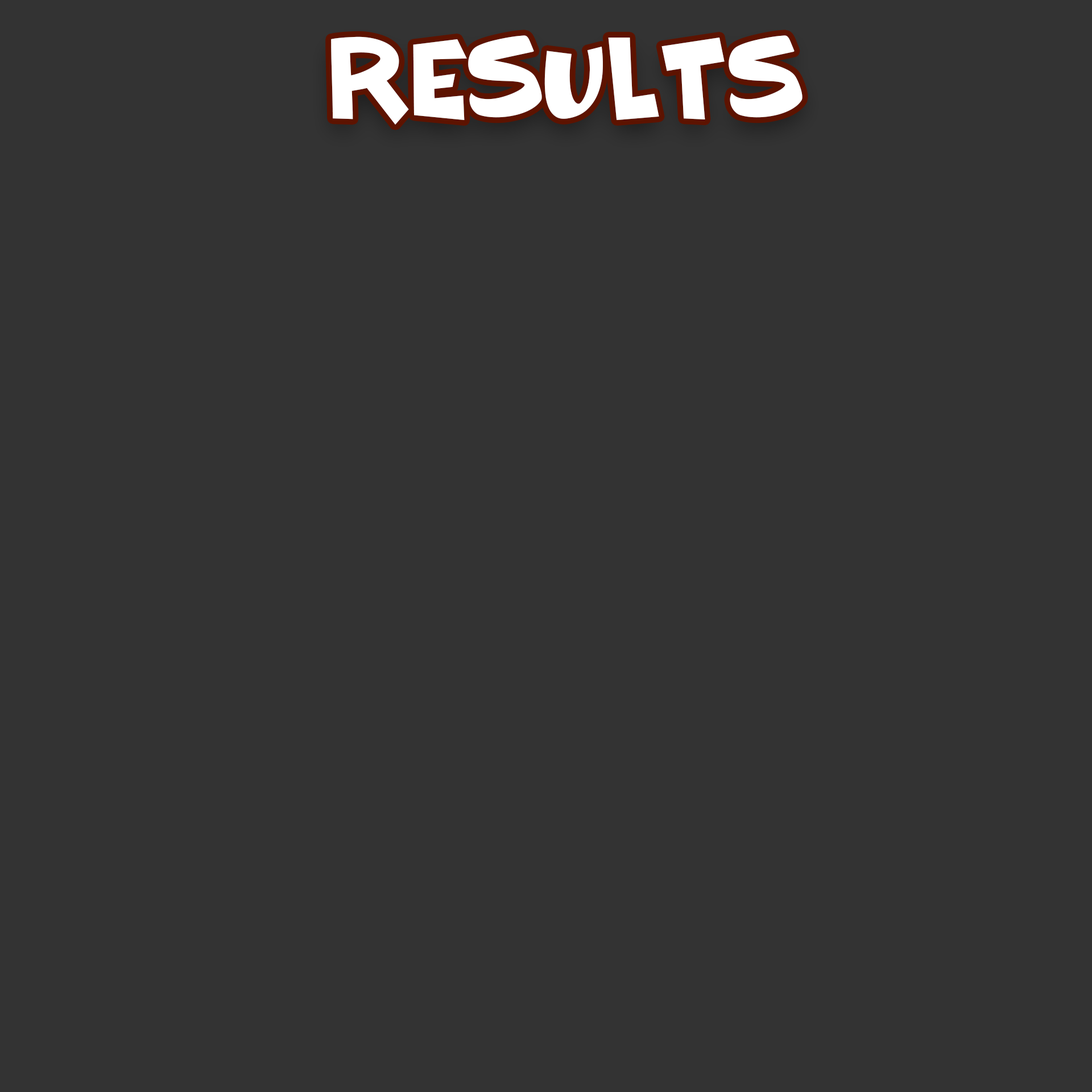
<style>
.page{position:relative;width:1092px;height:1092px;background:#333333}
.page>*{position:absolute;margin:0}
.t1{font:129.3px "BLOCKHEADDUDEPersonalUse";color:#ffffff;scale:0.83 1}
</style>
<div class="page">
<p class="t1" style="left:331px;top:35px;width:471px;height:90px">Results</p>
</div>
